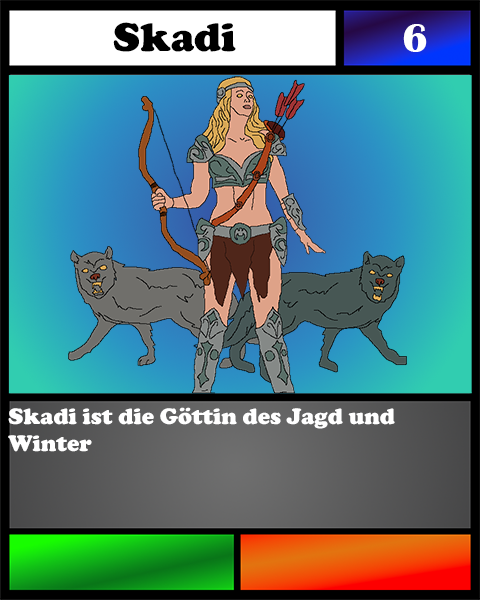
<style>
.page{position:relative;width:480px;height:600px}
.page>*{position:absolute;margin:0}
.t1{font:41.7px "CooperBlack";color:#000000}
.t2{font:41.7px "BritannicBold";color:#ffffff}
.t3{font:23.1px "CooperBlack";color:#ffffff}
</style>
<div class="page">
<p class="t1" style="left:113px;top:22px;width:123px;height:30px">Skadi</p>
<p class="t2" style="left:403px;top:24px;width:24px;height:28px">6</p>
<p class="t3" style="left:8px;top:407px;width:387px;height:45px">Skadi ist die Göttin des Jagd und <br>Winter</p>
</div>
